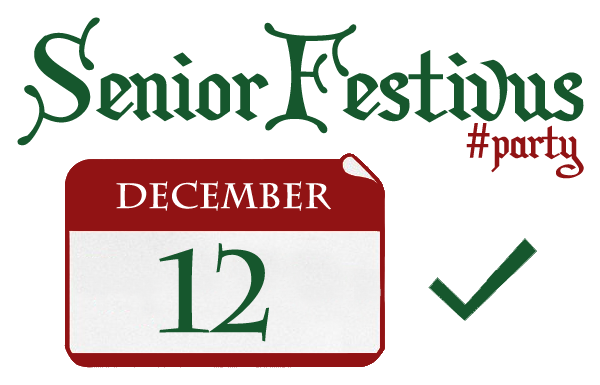
<style>
.page{position:relative;width:600px;height:385px;background:#ffffff}
.page>*{position:absolute;margin:0}
.t1{font:115px "ChristmasCardII";color:#16572d}
.t2{font:53px "ChristmasCardII";color:#911314}
.t3{font:53px "MyriadPro-Regular";color:#911314}
.t4{font:35px "CharlemagneStd-Bold";color:#ffffff}
.t5{font:115px "CharlemagneStd-Bold";color:#16572d}
</style>
<div class="page">
<p class="t1" style="left:17px;top:17px;width:567px;height:129px">SeniorFestivus</p>
<p class="t2" style="left:466px;top:123px;width:118px;height:56px"><span class="t3">#</span>party</p>
<p class="t4" style="left:116px;top:180px;width:215px;height:31px">December</p>
<p class="t5" style="left:159px;top:243px;width:110px;height:99px">12</p>
</div>
